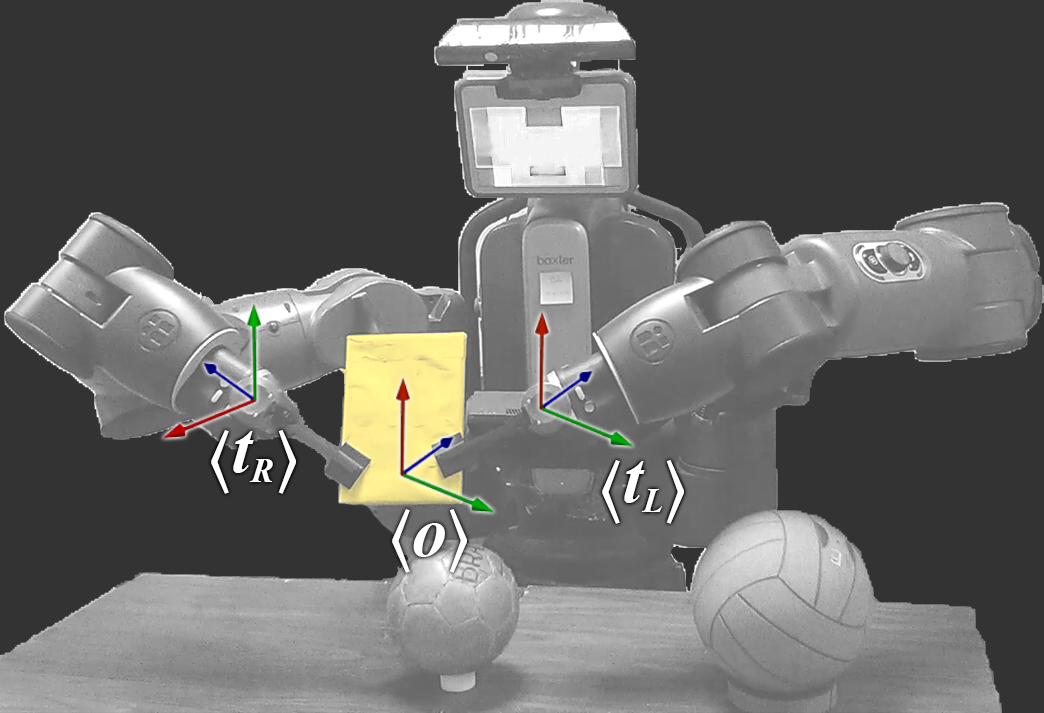
<style>
.page{position:relative;width:1044px;height:713px;background:#333333}
.page>*{position:absolute;margin:0}
.t1{font:70px "CambriaMath";color:#ffffff}
.t2{font:70px "TimesNewRomanPS-BoldItalicMT";color:#ffffff}
.t3{font:58.5px "TimesNewRomanPS-BoldItalicMT";color:#ffffff}
</style>
<div class="page">
<p class="t1" style="left:211px;top:430px;width:85px;height:64px">⟨<span class="t2">t</span><span class="t3">R</span>⟩</p>
<p class="t1" style="left:602px;top:460px;width:82px;height:64px">⟨<span class="t2">t</span><span class="t3">L</span>⟩</p>
<p class="t1" style="left:392px;top:509px;width:75px;height:64px">⟨<span class="t2">o</span>⟩</p>
</div>
